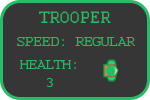
<style>
.page{position:relative;width:150px;height:100px;background:#363636}
.page>*{position:absolute;margin:0}
.t1{font:18px "Courier";color:#2bba67}
.t2{font:15px "Courier";color:#2bba67}
</style>
<div class="page">
<p class="t1" style="left:39px;top:11px;width:72px;height:12px">TROOPER</p>
<p class="t2" style="left:17px;top:37px;width:118px;height:9px">SPEED: REGULAR</p>
<p class="t2" style="left:20px;top:60px;width:56px;height:27px;text-align:center">HEALTH:<br>3</p>
</div>
